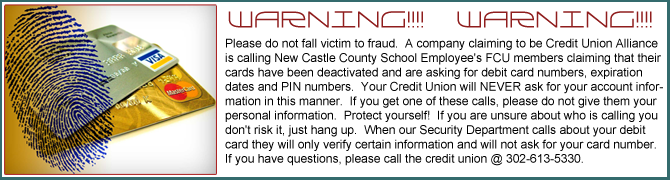
<style>
.page{position:relative;width:670px;height:180px;background:#ffffff}
.page>*{position:absolute;margin:0}
.t1{font:30px "Galga";color:#8f1d1d}
.t2{font:12px "ArialMT";color:#000000}
</style>
<div class="page">
<p class="t1" style="left:228px;top:11px;width:424px;height:17px"><span class="t2"><br> </span>Warning!!!!  Warning!!!!</p>
<p class="t2" style="left:225px;top:38px;width:438px;height:128px">Please do not fall victim to fraud.  A company claiming to be Credit Union Alliance is calling New Castle County School Employee's FCU members claiming that their cards have been deactivated and are asking for debit card numbers, expiration dates and PIN numbers.  Your Credit Union will NEVER ask for your account information in this manner.  If you get one of these calls, please do not give them your personal information.  Protect yourself!  If you are unsure about who is calling you don't risk it, just hang up.  When our Security Department calls about your debit card they will only verify certain information and will not ask for your card number.  If you have questions, please call the credit union @ 302-613-5330.</p>
</div>
